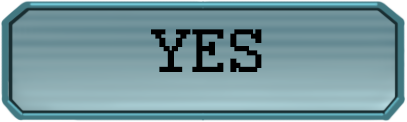
<style>
.page{position:relative;width:407px;height:122px}
.page>*{position:absolute;margin:0}
.t1{font:66.7px "Courier";color:#000000;font-weight:bold}
</style>
<div class="page">
<p class="t1" style="left:151px;top:29px;width:111px;height:43px">YES</p>
</div>
